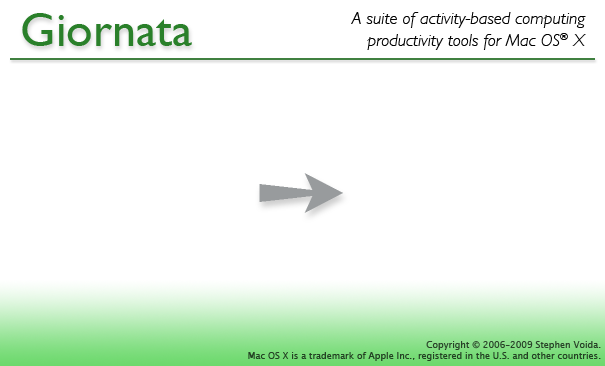
<style>
.page{position:relative;width:605px;height:366px;background:#ffffff}
.page>*{position:absolute;margin:0}
.t1{font:48px "GillSans";color:#2a802a}
.t2{font:18px "GillSans-LightItalic";color:#010101}
.t3{font:9px "LucidaGrande";color:#244224}
</style>
<div class="page">
<p class="t1" style="left:22px;top:13px;width:170px;height:33px">Giornata</p>
<p class="t2" style="left:351px;top:12px;width:235px;height:38px;text-align:right">A suite of activity-based computing<br>productivity tools for Mac OS® X</p>
<p class="t3" style="left:248px;top:341px;width:353px;height:20px;text-align:right">Copyright © 2006–2009 Stephen Voida.<br>Mac OS X is a trademark of Apple Inc., registered in the U.S. and other countries.</p>
</div>
